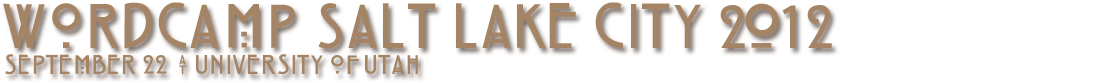
<style>
.page{position:relative;width:1100px;height:83px;background:#ffffff}
.page>*{position:absolute;margin:0}
.t1{font:58.3px "HillHouse";color:#a48465}
.t2{font:25.2px "HillHouse";color:#a48465}
</style>
<div class="page">
<p class="t1" style="left:3px;top:2px;width:829px;height:47px">WordCamp Salt Lake City 2012</p>
<p class="t2" style="left:5px;top:54px;width:413px;height:21px">September 22 @ University of Utah</p>
</div>
